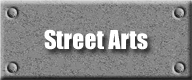
<style>
.page{position:relative;width:192px;height:80px}
.page>*{position:absolute;margin:0}
.t1{font:24px "Impact";color:#ffffff}
</style>
<div class="page">
<p class="t1" style="left:44px;top:29px;width:104px;height:21px">Street Arts</p>
</div>
